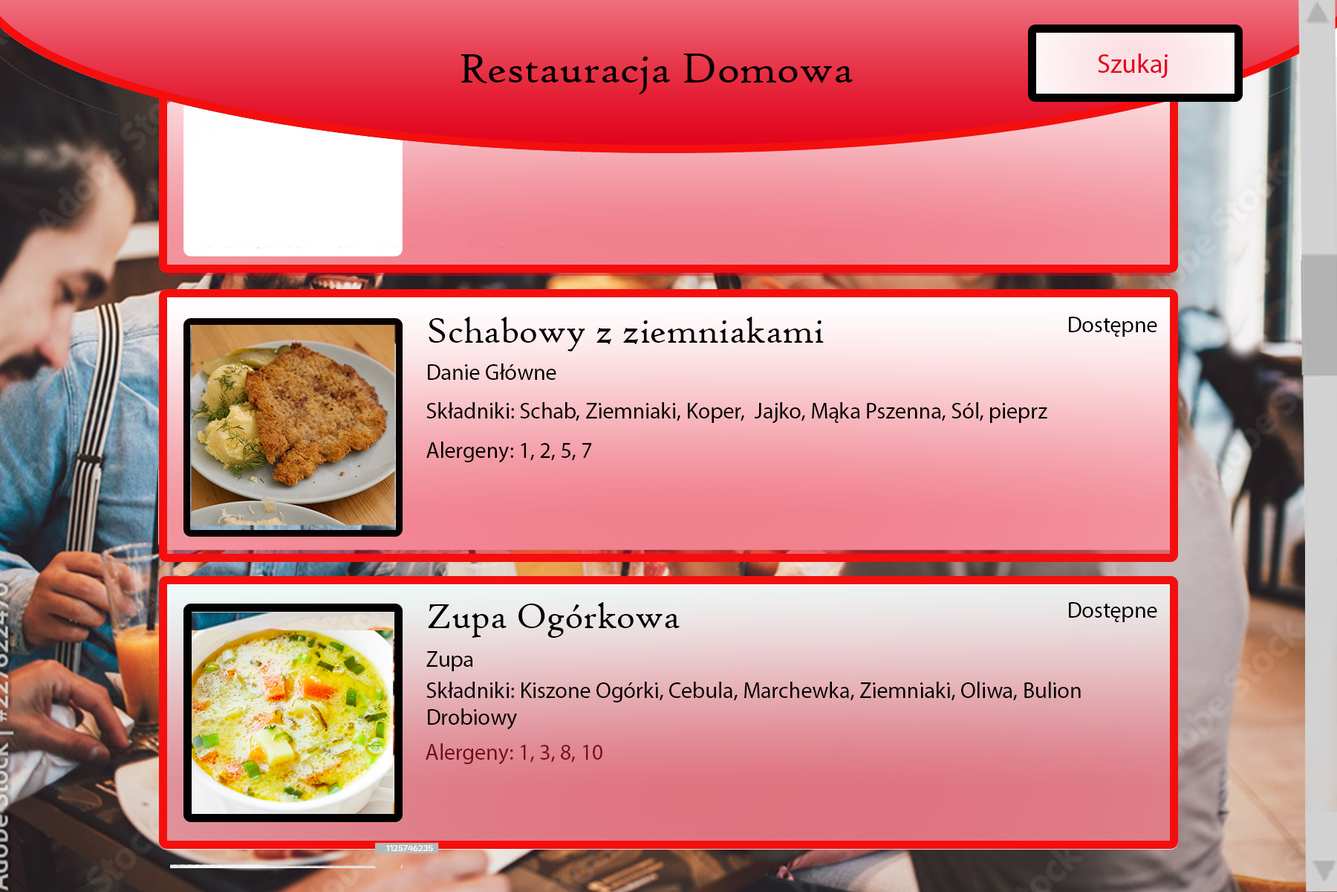
<style>
.page{position:relative;width:1337px;height:892px}
.page>*{position:absolute;margin:0}
.t1{font:44.6px "HighTowerText-Reg";color:#000000}
.t2{font:37.2px "HighTowerText-Reg";color:#000000}
.t3{font:22.3px "MyriadPro-Regular";color:#000000}
.t4{font:22.3px "MyriadPro-Regular";color:#6f0f1a}
</style>
<div class="page">
<p class="t1" style="left:461px;top:53px;width:392px;height:41px">Restauracja Domowa</p>
<p class="t2" style="left:429px;top:317px;width:395px;height:34px">Schabowy z ziemniakami</p>
<p class="t3" style="left:1069px;top:317px;width:89px;height:20px">Dostępne</p>
<p class="t3" style="left:428px;top:363px;width:129px;height:17px">Danie Główne</p>
<p class="t3" style="left:426px;top:402px;width:622px;height:21px">Składniki: Schab, Ziemniaki, Koper,  Jajko, Mąka Pszenna, Sól, pieprz</p>
<p class="t3" style="left:426px;top:441px;width:166px;height:22px">Alergeny: 1, 2, 5, 7</p>
<p class="t2" style="left:428px;top:602px;width:252px;height:35px">Zupa Ogórkowa</p>
<p class="t3" style="left:1069px;top:602px;width:89px;height:20px">Dostępne</p>
<p class="t3" style="left:426px;top:651px;width:47px;height:20px">Zupa</p>
<p class="t3" style="left:426px;top:681px;width:655px;height:49px">Składniki: Kiszone Ogórki, Cebula, Marchewka, Ziemniaki, Oliwa, Bulion<br>Drobiowy</p>
<p class="t4" style="left:426px;top:743px;width:177px;height:22px">Alergeny: 1, 3, 8, 10</p>
</div>
